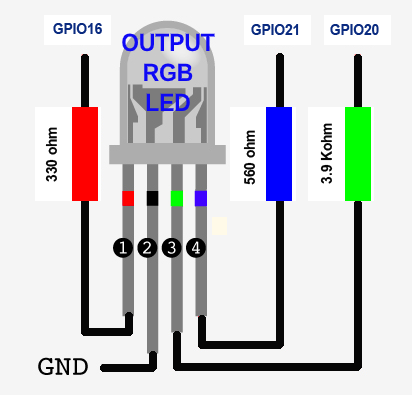
<style>
.page{position:relative;width:412px;height:395px;background:#f5f5f5}
.page>*{position:absolute;margin:0}
.t1{font:15px "Arial-BoldMT";color:#0a2b80;scale:0.91 1}
.t2{font:25px "Arial-BoldMT";color:#0e08f5;scale:0.91 1}
.t3{font:15px "Arial-BoldMT";color:#060606;scale:0.91 1}
</style>
<div class="page">
<p class="t1" style="left:53px;top:23px;width:49px;height:11px">GPIO16</p>
<p class="t1" style="left:251px;top:24px;width:48px;height:11px">GPIO21</p>
<p class="t1" style="left:330px;top:24px;width:49px;height:11px">GPIO20</p>
<p class="t2" style="left:122px;top:33px;width:93px;height:78px;text-align:center">OUTPUT<br>RGB<br>LED</p>
<p class="t3" style="left:320px;top:123px;width:13px;height:61px;rotate:-90deg">3.9 Kohm</p>
<p class="t3" style="left:45px;top:127px;width:12px;height:55px;rotate:-90deg">330 ohm</p>
<p class="t3" style="left:243px;top:130px;width:12px;height:55px;rotate:-90deg">560 ohm</p>
</div>
